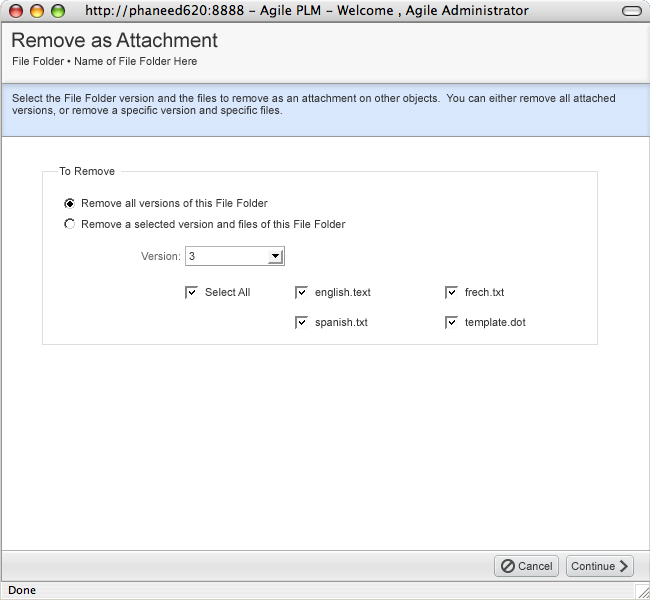
<style>
.page{position:relative;width:650px;height:600px;background:#ffffff}
.page>*{position:absolute;margin:0}
.t1{font:20px "ArialMT";color:#333333}
.t2{font:11px "ArialMT";color:#333333}
.t3{font:11px/12px "ArialMT";color:#333333}
.t4{font:11px "ArialMT";color:#666666}
</style>
<div class="page">
<p class="t1" style="left:12px;top:32px;width:206px;height:16px">Remove as Attachment</p>
<p class="t2" style="left:13px;top:57px;width:184px;height:8px">File Folder • Name of File Folder Here</p>
<p class="t3" style="left:12px;top:94px;width:603px;height:23px">Select the File Folder version and the files to remove as an attachment on other objects.  You can either remove all attached<br>versions, or remove a specific version and specific files.</p>
<p class="t2" style="left:59px;top:167px;width:56px;height:8px">To Remove</p>
<p class="t2" style="left:82px;top:199px;width:186px;height:8px">Remove all versions of this File Folder</p>
<p class="t2" style="left:82px;top:220px;width:264px;height:8px">Remove a selected version and files of this File Folder</p>
<p class="t4" style="left:141px;top:252px;width:39px;height:8px">Version:</p>
<p class="t2" style="left:189px;top:252px;width:6px;height:8px">3</p>
<p class="t2" style="left:205px;top:288px;width:45px;height:8px">Select All</p>
<p class="t2" style="left:315px;top:288px;width:56px;height:11px">english.text</p>
<p class="t2" style="left:465px;top:288px;width:39px;height:8px">frech.txt</p>
<p class="t2" style="left:315px;top:318px;width:53px;height:11px">spanish.txt</p>
<p class="t2" style="left:465px;top:318px;width:61px;height:11px">template.dot</p>
<p class="t2" style="left:518px;top:562px;width:34px;height:8px">Cancel</p>
<p class="t2" style="left:571px;top:562px;width:44px;height:8px">Continue</p>
</div>
